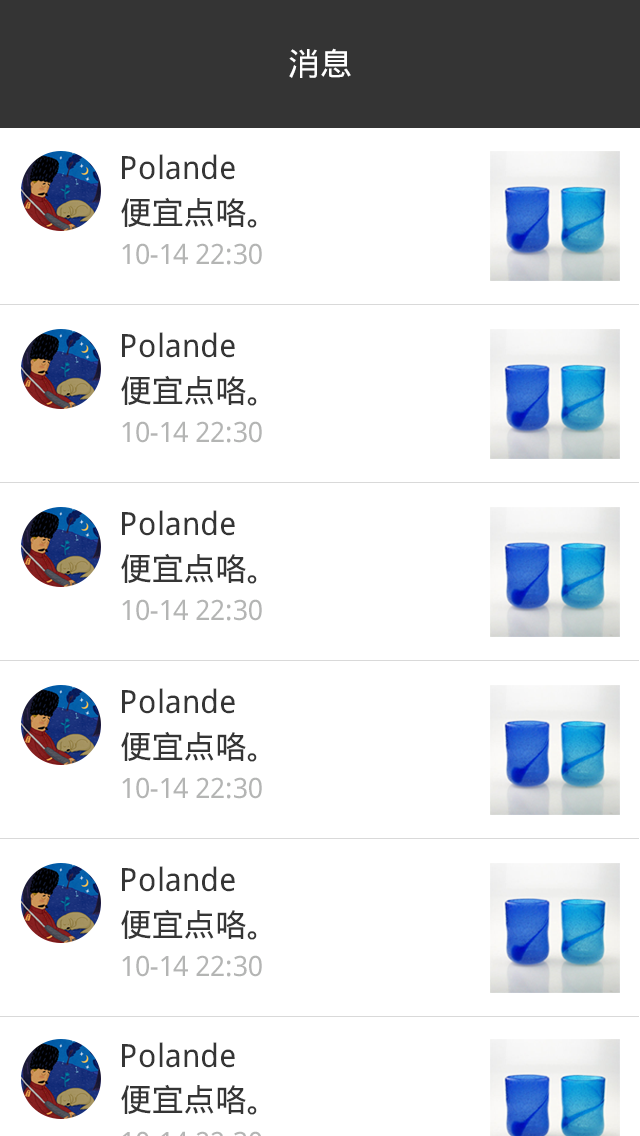
<style>
.page{position:relative;width:640px;height:1136px;background:#ffffff}
.page>*{position:absolute;margin:0}
.t1{font:32px "DroidSansFallback";color:#ffffff}
.t2{font:32px "DroidSansFallback";color:#353535}
.t3{font:28px "DroidSansFallback";color:#b4b5b4}
</style>
<div class="page">
<p class="t1" style="left:289px;top:48px;width:62px;height:30px">消息</p>
<p class="t2" style="left:122px;top:154px;width:113px;height:26px">Polande</p>
<p class="t2" style="left:121px;top:197px;width:136px;height:31px">便宜点咯。</p>
<p class="t3" style="left:122px;top:243px;width:140px;height:22px">10-14 22:30</p>
<p class="t2" style="left:122px;top:332px;width:113px;height:26px">Polande</p>
<p class="t2" style="left:121px;top:375px;width:136px;height:31px">便宜点咯。</p>
<p class="t3" style="left:122px;top:421px;width:140px;height:22px">10-14 22:30</p>
<p class="t2" style="left:122px;top:510px;width:113px;height:26px">Polande</p>
<p class="t2" style="left:121px;top:553px;width:136px;height:31px">便宜点咯。</p>
<p class="t3" style="left:122px;top:599px;width:140px;height:22px">10-14 22:30</p>
<p class="t2" style="left:122px;top:688px;width:113px;height:26px">Polande</p>
<p class="t2" style="left:121px;top:731px;width:136px;height:31px">便宜点咯。</p>
<p class="t3" style="left:122px;top:777px;width:140px;height:22px">10-14 22:30</p>
<p class="t2" style="left:122px;top:866px;width:113px;height:26px">Polande</p>
<p class="t2" style="left:121px;top:909px;width:136px;height:31px">便宜点咯。</p>
<p class="t3" style="left:122px;top:955px;width:140px;height:22px">10-14 22:30</p>
<p class="t2" style="left:122px;top:1042px;width:113px;height:26px">Polande</p>
<p class="t2" style="left:121px;top:1084px;width:136px;height:31px">便宜点咯。</p>
</div>
